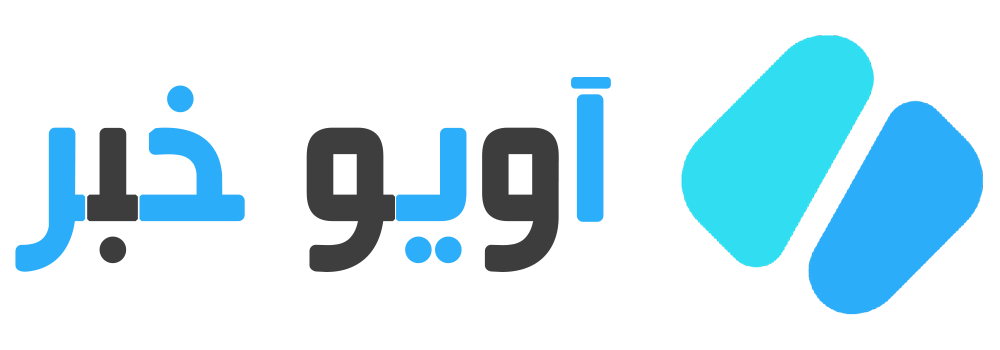
<style>
.page{position:relative;width:1000px;height:350px;background:#ffffff}
.page>*{position:absolute;margin:0}
.t1{font:211px "Mj_BeirutMd";color:#2caffb;font-weight:bold}
.t2{font:211px "Mj_BeirutMd";color:#3d3d3d;font-weight:bold}
.t3{font:211px "Mj_BeirutMd";color:#2caefa;font-weight:bold}
.t4{font:211px "Mj_BeirutMd";color:#3e3e3e;font-weight:bold}
.t5{font:211px "Mj_BeirutMd";color:#2badf9;font-weight:bold}
</style>
<div class="page">
<p class="t1" style="left:15px;top:77px;width:596px;height:195px">آ<span class="t2">و</span><span class="t3">ی</span><span class="t4">و </span><span class="t5">خ</span><span class="t2">ب</span><span class="t5">ر</span></p>
</div>
